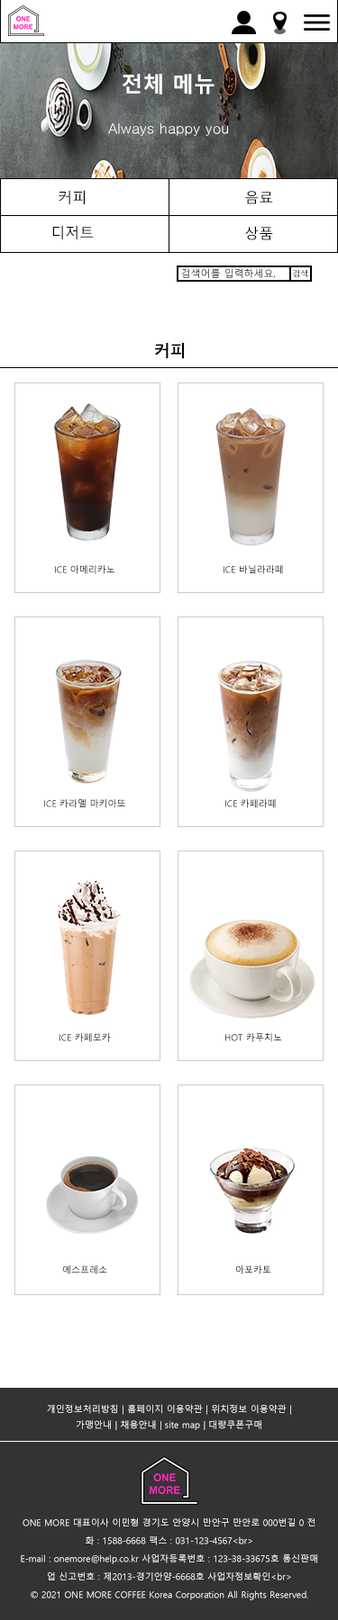
<style>
.page{position:relative;width:338px;height:1620px;background:#ffffff}
.page>*{position:absolute;margin:0}
.t1{font:21.6px "MalgunGothicBold";color:#ffffff}
.t2{font:14.4px "Gulim";color:#ffffff}
.t3{font:14.4px "MalgunGothicRegular";color:#000000}
.t4{font:9.9px "MalgunGothicRegular"}
.t5{font:8.1px "MalgunGothicRegular"}
.t6{font:16.2px "MalgunGothicBold";color:#000000}
.t7{font:9px "MalgunGothicRegular"}
.t8{font:9px "MalgunGothicRegular";color:#000000}
.t9{font:9px "MalgunGothicRegular";color:#ffffff}
.t10{font:9px/18px "MalgunGothicRegular";color:#ffffff}
</style>
<div class="page">
<p class="t1" style="left:122px;top:74px;width:92px;height:20px">전체 메뉴</p>
<p class="t2" style="left:108px;top:123px;width:120px;height:13px">Always happy you</p>
<p class="t3" style="left:58px;top:190px;width:27px;height:14px">커피</p>
<p class="t3" style="left:245px;top:191px;width:28px;height:13px">음료</p>
<p class="t3" style="left:52px;top:225px;width:42px;height:14px">디저트</p>
<p class="t3" style="left:245px;top:226px;width:28px;height:14px">상품</p>
<p class="t4" style="left:181px;top:268px;width:94px;height:10px">검색어를 입력하세요.</p>
<p class="t5" style="left:292px;top:269px;width:15px;height:9px">검색</p>
<p class="t6" style="left:154px;top:343px;width:30px;height:16px">커피</p>
<p class="t7" style="left:55px;top:565px;width:59px;height:9px">ICE 아메리카노</p>
<p class="t7" style="left:223px;top:565px;width:60px;height:9px">ICE 바닐라라떼</p>
<p class="t7" style="left:44px;top:799px;width:81px;height:9px">ICE 카라멜 마키아또</p>
<p class="t7" style="left:225px;top:799px;width:50px;height:9px">ICE 카페라떼</p>
<p class="t7" style="left:59px;top:1033px;width:52px;height:9px">ICE 카페모카</p>
<p class="t8" style="left:225px;top:1033px;width:57px;height:9px">HOT 카푸치노</p>
<p class="t7" style="left:63px;top:1265px;width:44px;height:9px">에스프레소</p>
<p class="t7" style="left:236px;top:1265px;width:35px;height:9px">아포카토</p>
<p class="t9" style="left:47px;top:1404px;width:244px;height:26px;text-align:center">개인정보처리방침 | 홈페이지 이용약관 | 위치정보 이용약관 |<br>가맹안내 | 채용안내 | site map | 대량쿠폰구매</p>
<p class="t10" style="left:21px;top:1518px;width:296px;height:82px;text-align:center">ONE MORE 대표이사 이민형 경기도 안양시 만안구 만안로 000번길 0 전<br>화 : 1588-6668 팩스 : 031-123-4567&lt;br&gt;<br>E-mail : onemore@help.co.kr 사업자등록번호 : 123-38-33675호 통신판매<br>업 신고번호 : 제2013-경기안양-6668호 사업자정보확인&lt;br&gt;<br>© 2021 ONE MORE COFFEE Korea Corporation All Rights Reserved.</p>
</div>
